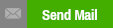
<style>
.page{position:relative;width:113px;height:28px;background:#43ae00}
.page>*{position:absolute;margin:0}
.t1{font:14.5px "ArchivoNarrow-Bold";color:#ffffff}
</style>
<div class="page">
<p class="t1" style="left:42px;top:9px;width:55px;height:11px">Send Mail</p>
</div>
